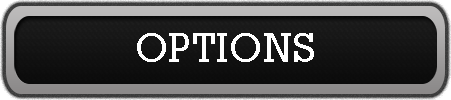
<style>
.page{position:relative;width:451px;height:100px}
.page>*{position:absolute;margin:0}
.t1{font:41.7px "Rockwell";color:#ffffff}
</style>
<div class="page">
<p class="t1" style="left:137px;top:33px;width:177px;height:29px">OPTIONS</p>
</div>
